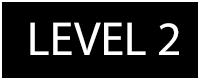
<style>
.page{position:relative;width:200px;height:80px;background:#000000}
.page>*{position:absolute;margin:0}
.t1{font:48px "MyriadPro-Regular";color:#ffffff}
</style>
<div class="page">
<p class="t1" style="left:30px;top:22px;width:149px;height:33px">LEVEL 2</p>
</div>
